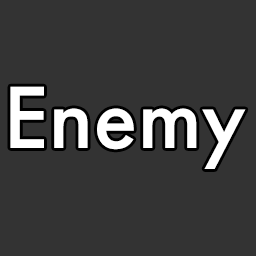
<style>
.page{position:relative;width:256px;height:256px;background:#333333}
.page>*{position:absolute;margin:0}
.t1{font:91.7px "FuturaPT-Medium";color:#ffffff}
</style>
<div class="page">
<p class="t1" style="left:10px;top:86px;width:236px;height:83px">Enemy</p>
</div>
